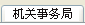
<style>
.page{position:relative;width:85px;height:25px;background:#ffffff}
.page>*{position:absolute;margin:0}
.t1{font:12px "SimSun";color:#151010}
</style>
<div class="page">
<p class="t1" style="left:13px;top:8px;width:59px;height:11px">机关事务局</p>
</div>
